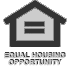
<style>
.page{position:relative;width:69px;height:67px;background:#ffffff}
.page>*{position:absolute;margin:0}
.t1{font:6.9px/6.9px "Arial-BoldMT";letter-spacing:0.01em;font-weight:bold}
</style>
<div class="page">
<p class="t1" style="left:5px;top:52px;width:61px;height:13px;text-align:center">EQUAL HOUSING<br>OPPORTUNITY</p>
</div>
